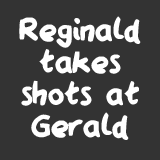
<style>
.page{position:relative;width:160px;height:160px;background:#333333}
.page>*{position:absolute;margin:0}
.t1{font:35.9px/31.9px "QAReports";color:#ffffff}
</style>
<div class="page">
<p class="t1" style="left:19px;top:16px;width:122px;height:124px;text-align:center">Reginald<br>takes<br>shots at<br>Gerald</p>
</div>
